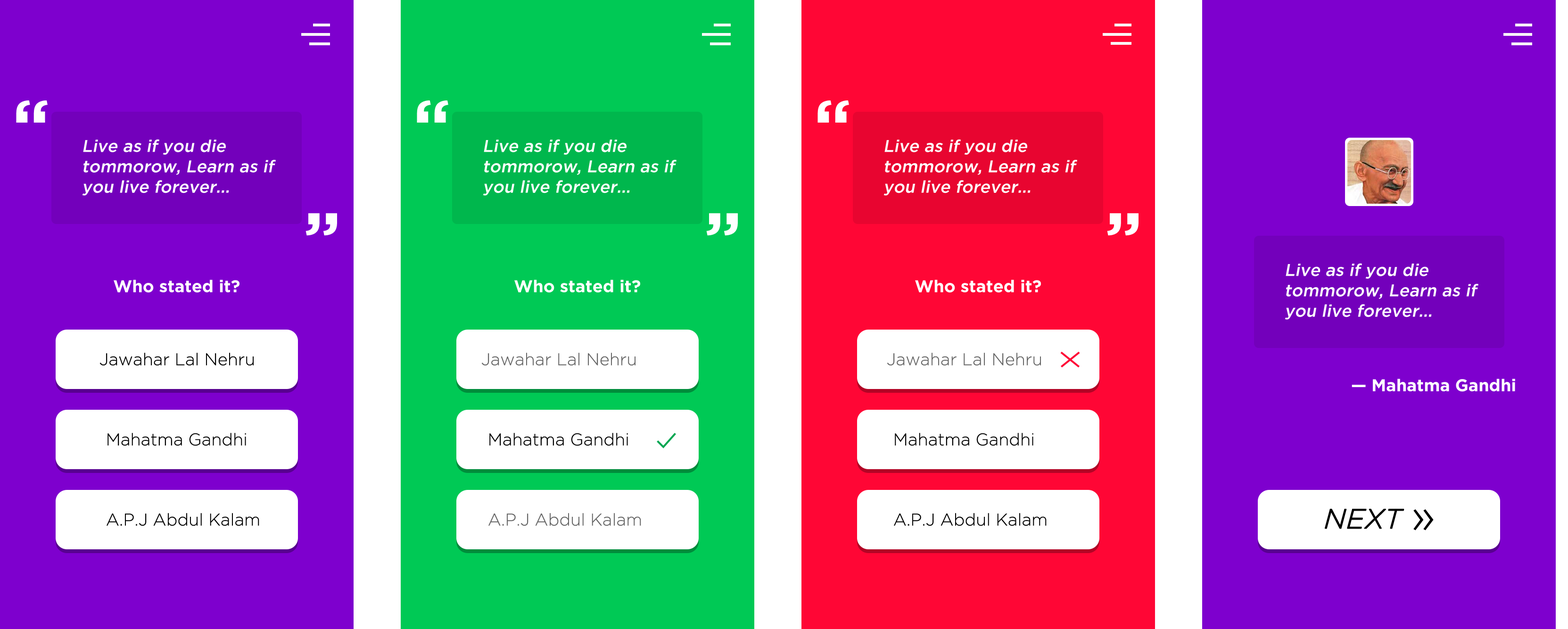
<style>
.page{position:relative;width:1568px;height:629px;background:#7e00ce}
.page>*{position:absolute;margin:0}
.t1{font:68.8px "GothamBold";color:#ffffff}
.t2{font:17px "GothamMedium";color:#fefefe;font-style:italic}
.t3{font:17px "GothamBold";color:#ffffff}
.t4{font:17px "GothamLight";color:#000000}
.t5{font:17px "GothamLight";color:#666666}
.t6{font:27.4px "GothamLight-Italic";color:#000000;font-weight:bold}
.t7{font:48.8px "GothamLight";color:#000000}
</style>
<div class="page">
<p class="t1" style="left:16px;top:100px;width:32px;height:23px">“</p>
<p class="t1" style="left:417px;top:100px;width:31px;height:23px">“</p>
<p class="t1" style="left:817px;top:100px;width:32px;height:23px">“</p>
<p class="t2" style="left:82px;top:139px;width:194px;height:57px">Live as if you die tommorow, Learn as if you live forever...</p>
<p class="t2" style="left:483px;top:139px;width:194px;height:57px">Live as if you die tommorow, Learn as if you live forever...</p>
<p class="t2" style="left:883px;top:139px;width:194px;height:57px">Live as if you die tommorow, Learn as if you live forever...</p>
<p class="t1" style="left:305px;top:213px;width:32px;height:23px;rotate:180deg">“</p>
<p class="t1" style="left:706px;top:213px;width:32px;height:23px;rotate:180deg">“</p>
<p class="t1" style="left:1107px;top:213px;width:32px;height:23px;rotate:180deg">“</p>
<p class="t2" style="left:1285px;top:263px;width:193px;height:57px">Live as if you die tommorow, Learn as if you live forever...</p>
<p class="t3" style="left:114px;top:280px;width:125px;height:13px">Who stated it?</p>
<p class="t3" style="left:514px;top:280px;width:126px;height:13px">Who stated it?</p>
<p class="t3" style="left:915px;top:280px;width:126px;height:13px">Who stated it?</p>
<p class="t4" style="left:99px;top:353px;width:155px;height:13px">Jawahar Lal Nehru</p>
<p class="t5" style="left:481px;top:353px;width:154px;height:13px">Jawahar Lal Nehru</p>
<p class="t5" style="left:887px;top:353px;width:154px;height:13px">Jawahar Lal Nehru</p>
<p class="t3" style="left:1352px;top:379px;width:163px;height:13px">— Mahatma Gandhi</p>
<p class="t4" style="left:107px;top:433px;width:139px;height:13px">Mahatma Gandhi</p>
<p class="t4" style="left:489px;top:433px;width:139px;height:13px">Mahatma Gandhi</p>
<p class="t4" style="left:895px;top:433px;width:138px;height:13px">Mahatma Gandhi</p>
<p class="t6" style="left:1325px;top:509px;width:109px;height:21px">NEXT <span class="t7">»</span></p>
<p class="t4" style="left:107px;top:513px;width:152px;height:13px">A.P.J Abdul Kalam</p>
<p class="t5" style="left:488px;top:513px;width:153px;height:13px">A.P.J Abdul Kalam</p>
<p class="t4" style="left:894px;top:513px;width:153px;height:13px">A.P.J Abdul Kalam</p>
</div>
